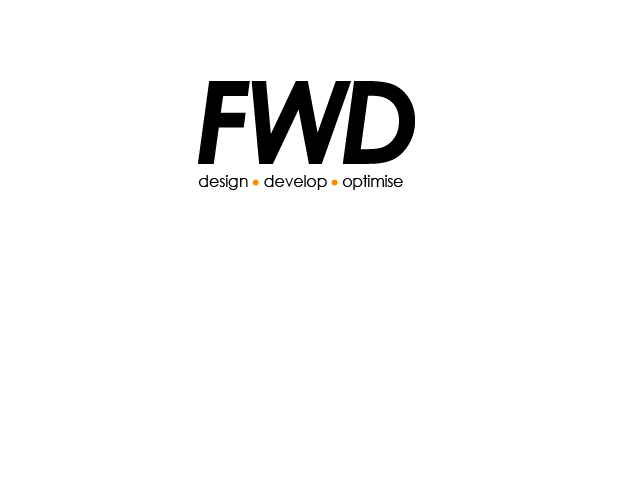
<style>
.page{position:relative;width:640px;height:480px;background:#ffffff}
.page>*{position:absolute;margin:0}
.t1{font:115.1px "CenturyGothic-BoldItalic";letter-spacing:-0.025em;color:#000000}
.t2{font:16.4px "CenturyGothic";letter-spacing:-0.025em;color:#000000}
.t3{font:36px "CenturyGothic-BoldItalic";letter-spacing:-0.025em;color:#ff8a00}
.t4{font:16.3px "CenturyGothic";letter-spacing:-0.025em;color:#000000}
.t5{font:15.7px "CenturyGothic";letter-spacing:-0.025em;color:#000000}
</style>
<div class="page">
<p class="t1" style="left:198px;top:81px;width:52px;height:83px">F</p>
<p class="t1" style="left:251px;top:81px;width:100px;height:83px">W</p>
<p class="t1" style="left:342px;top:81px;width:73px;height:83px">D</p>
<p class="t2" style="left:198px;top:175px;width:50px;height:15px">design</p>
<p class="t3" style="left:252px;top:179px;width:7px;height:7px">.</p>
<p class="t4" style="left:264px;top:175px;width:63px;height:15px">develop</p>
<p class="t3" style="left:331px;top:179px;width:7px;height:7px">.</p>
<p class="t5" style="left:342px;top:175px;width:61px;height:15px">optimise</p>
</div>
